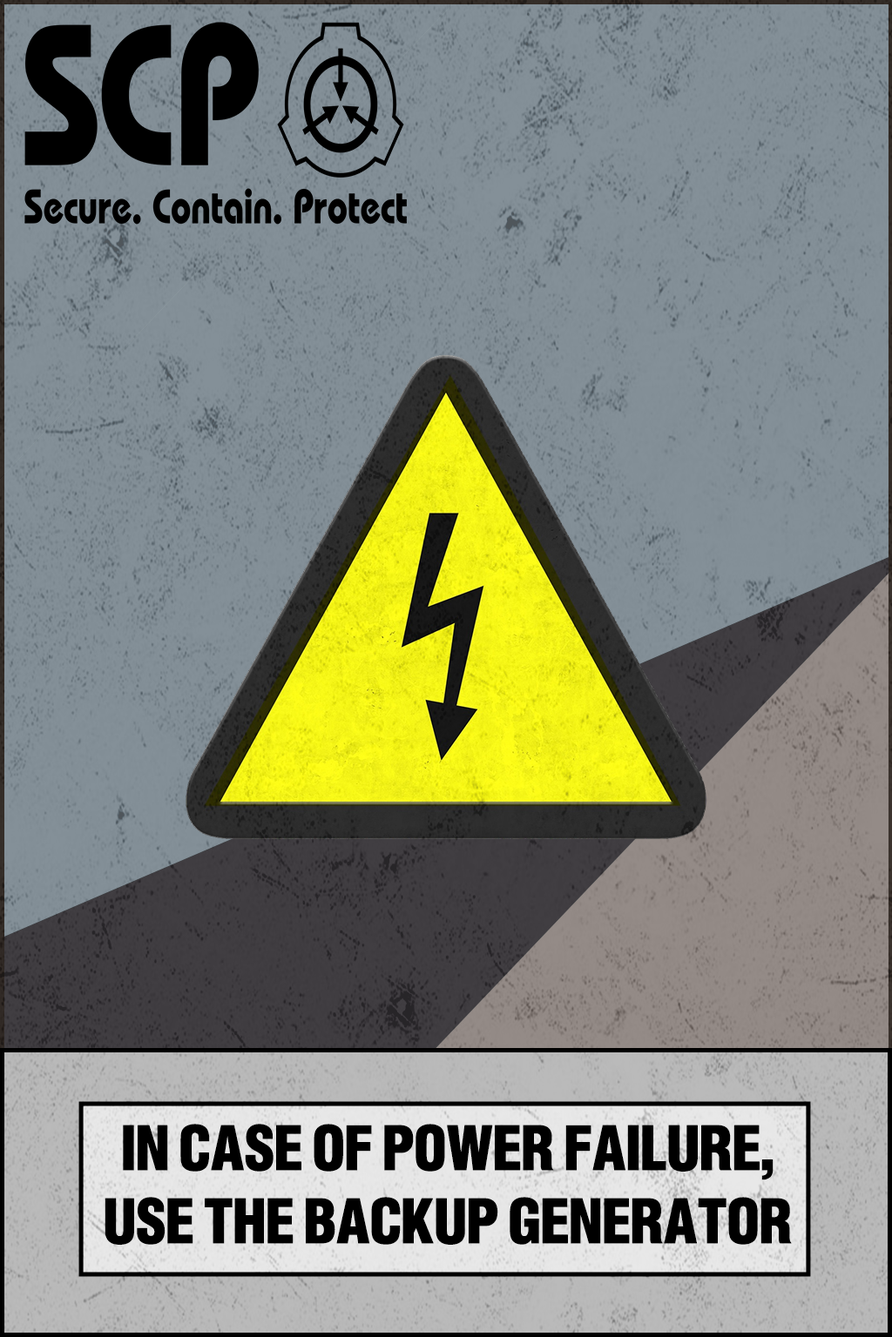
<style>
.page{position:relative;width:892px;height:1337px}
.page>*{position:absolute;margin:0}
.t1{font:60.9px "EuropaGroSHOP-BolCon";color:#000000;text-transform:uppercase;font-weight:bold}
</style>
<div class="page">
<p class="t1" style="left:104px;top:1124px;width:687px;height:121px;text-align:center">In case of power failure, <br>use the backup generator</p>
</div>
